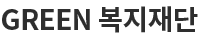
<style>
.page{position:relative;width:200px;height:40px;background:#ffffff}
.page>*{position:absolute;margin:0}
.t1{font:28px "NotoSansKR-Bold";letter-spacing:-0.025em;color:#2e2e2e;text-transform:uppercase}
</style>
<div class="page">
<p class="t1" style="left:2px;top:6px;width:196px;height:27px">green 복지재단</p>
</div>
